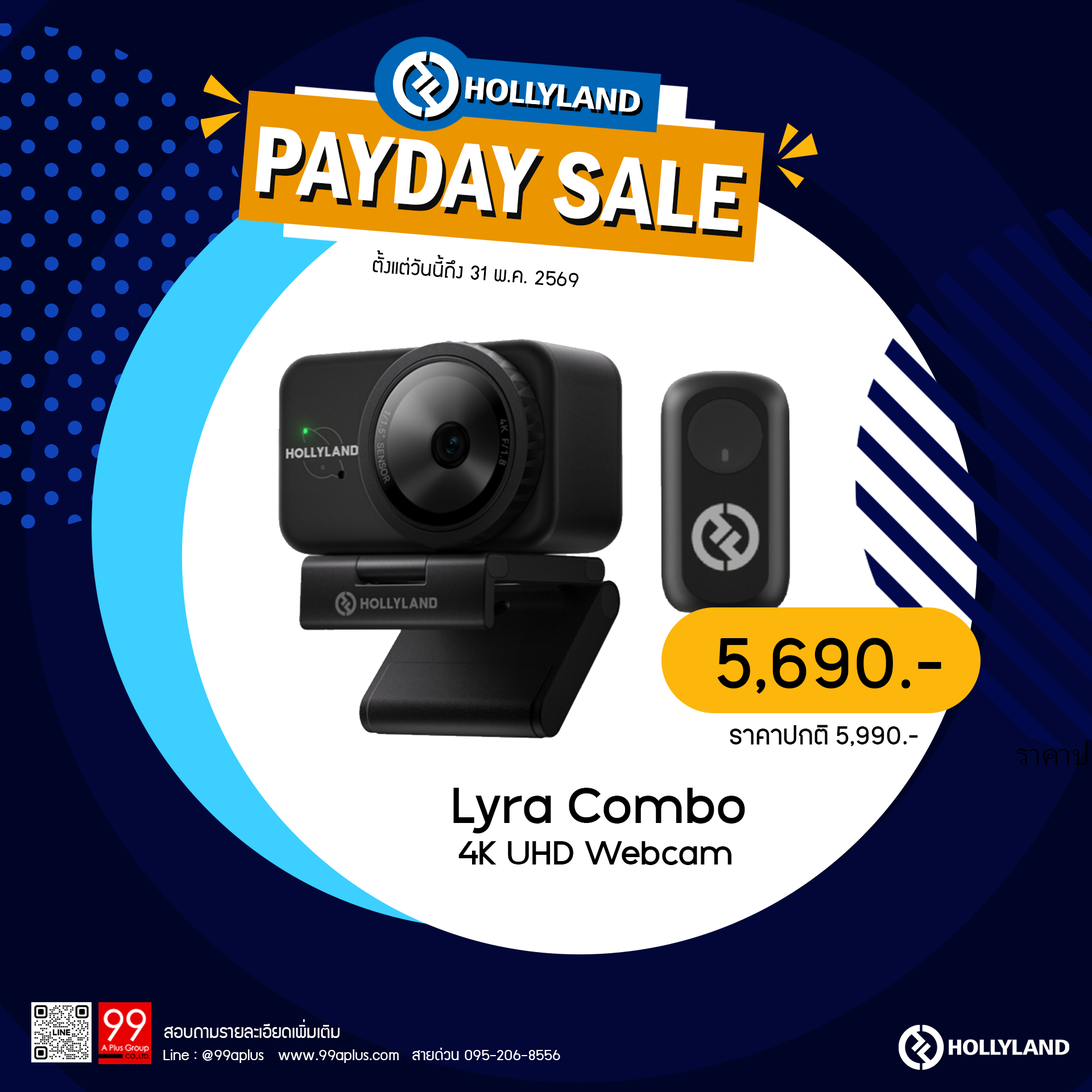
<style>
.page{position:relative;width:1092px;height:1092px;background:#ffffff}
.page>*{position:absolute;margin:0}
.t1{font:97.5px "FranklinGothic-DemiCond";color:#ffffff}
.t2{font:97.5px "FranklinGothic-DemiCond"}
.t3{font:23.2px "supermarket";color:#000000}
.t4{font:83.5px "PK-NakhonPathom-Demo";color:#000000}
.t5{font:30.3px "PK-NakhonPathom-Demo";color:#000000}
.t6{font:54px "GalakPro-Demo";color:#000000}
.t7{font:35.6px "GalakPro-Demo";color:#000000}
.t8{font:19.8px "supermarket";color:#ffffff}
.t9{font:17.2px "supermarket";color:#ffffff}
</style>
<div class="page">
<p class="t1" style="left:255px;top:126px;width:488px;height:105px;rotate:5deg">PAYDAY SALE</p>
<p class="t2" style="left:259px;top:133px;width:488px;height:105px;rotate:5deg">PAYDAY SALE</p>
<p class="t3" style="left:373px;top:250px;width:205px;height:37px;rotate:4deg">ตั้งแต่วันนี้ถึง 31 พ.ค. 2569</p>
<p class="t4" style="left:717px;top:638px;width:224px;height:56px">5,690.-</p>
<p class="t5" style="left:730px;top:725px;width:188px;height:21px">ราคาปกติ 5,990.-</p>
<p class="t6" style="left:453px;top:788px;width:292px;height:46px">Lyra Combo</p>
<p class="t7" style="left:458px;top:841px;width:273px;height:24px">4K UHD Webcam</p>
<p class="t8" style="left:164px;top:1019px;width:176px;height:19px">สอบถามรายละเอียดเพิ่มเติม</p>
<p class="t9" style="left:163px;top:1049px;width:236px;height:14px">Line : @99aplus   www.99aplus.com</p>
<p class="t9" style="left:412px;top:1048px;width:148px;height:12px">สายด่วน 095-206-8556</p>
</div>
